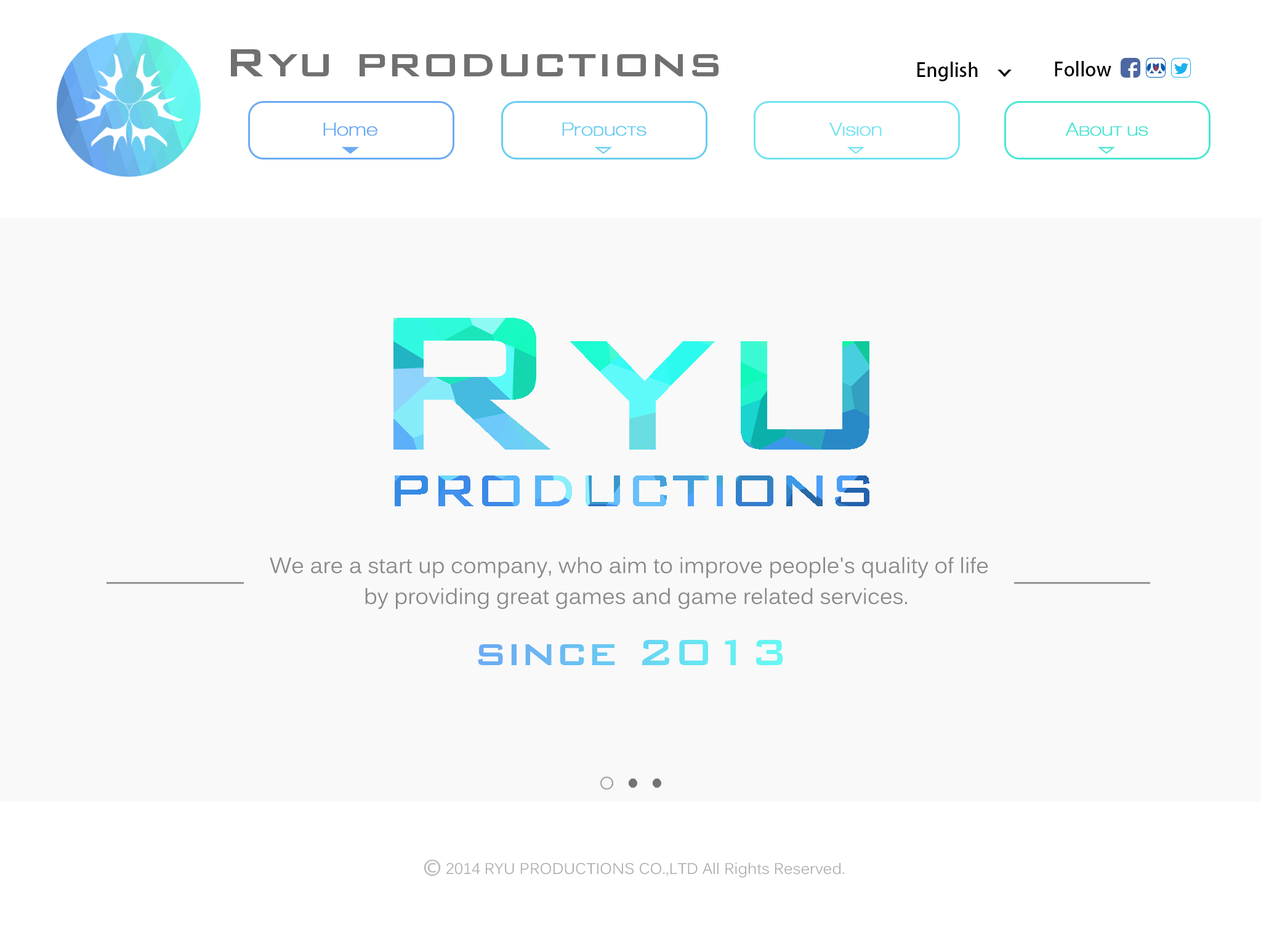
<style>
.page{position:relative;width:1261px;height:946px;background:#f9f9f9}
.page>*{position:absolute;margin:0}
.t1{font:52.7px "BankGothicBT-Medium";color:#707070}
.t2{font:19.1px "AdobeHeitiStd-Regular";color:#000000}
.t3{font:33.5px "AppleSymbols";color:#ffffff;font-weight:bold}
.t4{font:17.8px "Helvelow";color:#6baaf2;font-weight:bold}
.t5{font:17.8px "Helvelow";color:#6bcdf1;font-weight:bold}
.t6{font:17.8px "Helvelow";color:#71e4f2;font-weight:bold}
.t7{font:17.8px "Helvelow";color:#4ae8d2;font-weight:bold}
.t8{font:21.6px/30.9px "Kalinga";color:#898989}
.t9{font:49.2px "BankGothicBT-Medium"}
.t10{font:15.3px "Kalinga";color:#adadad}
</style>
<div class="page">
<p class="t1" style="left:231px;top:49px;width:488px;height:27px">Ryu productions</p>
<p class="t1" style="left:231px;top:49px;width:488px;height:27px">Ryu productions</p>
<p class="t2" style="left:917px;top:62px;width:61px;height:19px">English</p>
<p class="t2" style="left:1055px;top:61px;width:56px;height:15px">Follow</p>
<p class="t3" style="left:1128px;top:62px;width:9px;height:20px">f</p>
<p class="t4" style="left:323px;top:123px;width:55px;height:13px">Home</p>
<p class="t5" style="left:562px;top:123px;width:84px;height:13px">Products</p>
<p class="t6" style="left:829px;top:123px;width:53px;height:13px">Vision</p>
<p class="t7" style="left:1065px;top:123px;width:83px;height:13px">About us</p>
<p class="t8" style="left:270px;top:557px;width:718px;height:52px">We are a start up company, who aim to improve people's quality of life<br>                by providing great games and game related services.</p>
<p class="t9" style="left:478px;top:639px;width:305px;height:26px">since 2013</p>
<p class="t10" style="left:446px;top:862px;width:398px;height:15px">2014 RYU PRODUCTIONS CO.,LTD All Rights Reserved.</p>
</div>
